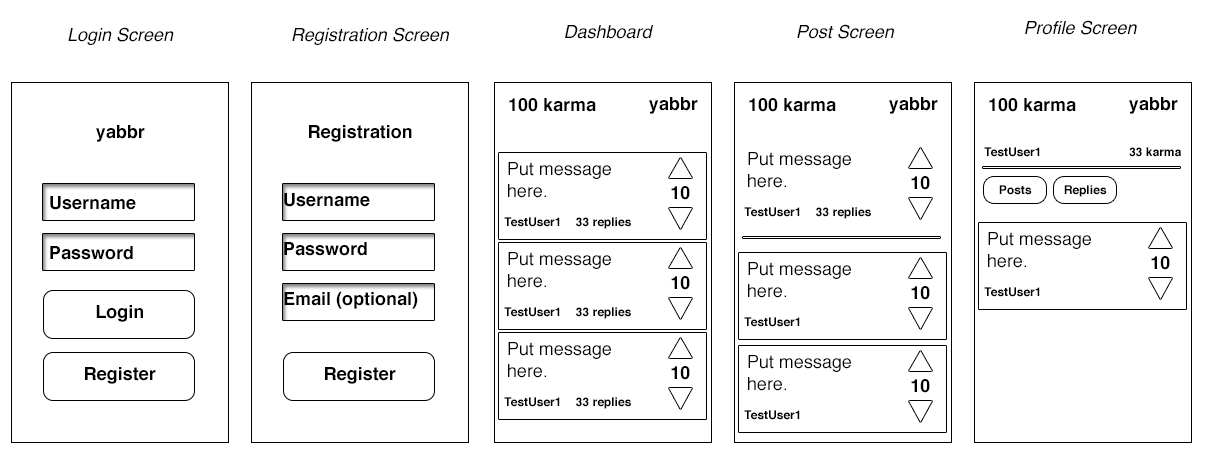
<style>
.page{position:relative;width:1210px;height:462px;background:#ffffff}
.page>*{position:absolute;margin:0}
.t1{font:18px "Helvetica-Oblique";color:#000000}
.t2{font:18px "Helvetica-Bold";color:#000000}
.t3{font:12px "Helvetica-Bold";color:#000000}
.t4{font:18px "Helvetica";color:#000000}
</style>
<div class="page">
<p class="t1" style="left:68px;top:27px;width:106px;height:18px">Login Screen</p>
<p class="t1" style="left:292px;top:27px;width:157px;height:18px">Registration Screen</p>
<p class="t1" style="left:565px;top:25px;width:88px;height:14px">Dashboard</p>
<p class="t1" style="left:797px;top:24px;width:97px;height:15px">Post Screen</p>
<p class="t1" style="left:1025px;top:20px;width:112px;height:15px">Profile Screen</p>
<p class="t2" style="left:509px;top:98px;width:87px;height:14px">100 karma</p>
<p class="t2" style="left:649px;top:97px;width:49px;height:17px">yabbr</p>
<p class="t2" style="left:749px;top:98px;width:87px;height:14px">100 karma</p>
<p class="t2" style="left:889px;top:97px;width:49px;height:17px">yabbr</p>
<p class="t2" style="left:989px;top:98px;width:87px;height:14px">100 karma</p>
<p class="t2" style="left:1129px;top:97px;width:49px;height:17px">yabbr</p>
<p class="t2" style="left:96px;top:125px;width:49px;height:17px">yabbr</p>
<p class="t2" style="left:309px;top:125px;width:103px;height:17px">Registration</p>
<p class="t3" style="left:984px;top:147px;width:56px;height:10px">TestUser1</p>
<p class="t3" style="left:1129px;top:147px;width:52px;height:10px">33 karma</p>
<p class="t4" style="left:748px;top:152px;width:103px;height:36px">Put message here.</p>
<p class="t4" style="left:508px;top:162px;width:103px;height:36px">Put message here.</p>
<p class="t2" style="left:911px;top:176px;width:19px;height:14px">10</p>
<p class="t3" style="left:999px;top:185px;width:33px;height:10px">Posts</p>
<p class="t3" style="left:1064px;top:185px;width:43px;height:12px">Replies</p>
<p class="t2" style="left:50px;top:196px;width:86px;height:14px">Username</p>
<p class="t2" style="left:284px;top:193px;width:86px;height:14px">Username</p>
<p class="t2" style="left:671px;top:186px;width:19px;height:14px">10</p>
<p class="t3" style="left:744px;top:207px;width:56px;height:10px">TestUser1</p>
<p class="t3" style="left:816px;top:207px;width:55px;height:12px">33 replies</p>
<p class="t3" style="left:504px;top:217px;width:56px;height:10px">TestUser1</p>
<p class="t3" style="left:576px;top:217px;width:55px;height:12px">33 replies</p>
<p class="t4" style="left:988px;top:232px;width:103px;height:36px">Put message here.</p>
<p class="t2" style="left:50px;top:246px;width:83px;height:14px">Password</p>
<p class="t2" style="left:284px;top:242px;width:83px;height:14px">Password</p>
<p class="t4" style="left:508px;top:252px;width:103px;height:36px">Put message here.</p>
<p class="t2" style="left:1151px;top:256px;width:19px;height:14px">10</p>
<p class="t4" style="left:748px;top:262px;width:103px;height:36px">Put message here.</p>
<p class="t2" style="left:671px;top:276px;width:19px;height:14px">10</p>
<p class="t2" style="left:284px;top:291px;width:134px;height:18px">Email (optional)</p>
<p class="t2" style="left:911px;top:286px;width:19px;height:14px">10</p>
<p class="t3" style="left:984px;top:287px;width:56px;height:10px">TestUser1</p>
<p class="t2" style="left:96px;top:305px;width:47px;height:17px">Login</p>
<p class="t3" style="left:504px;top:307px;width:56px;height:10px">TestUser1</p>
<p class="t3" style="left:576px;top:307px;width:55px;height:12px">33 replies</p>
<p class="t3" style="left:744px;top:317px;width:56px;height:10px">TestUser1</p>
<p class="t4" style="left:508px;top:342px;width:103px;height:36px">Put message here.</p>
<p class="t2" style="left:671px;top:366px;width:19px;height:14px">10</p>
<p class="t4" style="left:748px;top:355px;width:103px;height:36px">Put message here.</p>
<p class="t2" style="left:85px;top:367px;width:71px;height:17px">Register</p>
<p class="t2" style="left:325px;top:367px;width:71px;height:17px">Register</p>
<p class="t2" style="left:911px;top:379px;width:19px;height:14px">10</p>
<p class="t3" style="left:504px;top:397px;width:56px;height:10px">TestUser1</p>
<p class="t3" style="left:576px;top:397px;width:55px;height:12px">33 replies</p>
<p class="t3" style="left:744px;top:410px;width:56px;height:10px">TestUser1</p>
</div>
